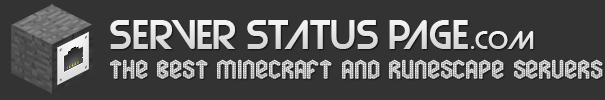
<style>
.page{position:relative;width:605px;height:100px;background:#333333}
.page>*{position:absolute;margin:0}
.t1{font:40px "Strasua";color:#e4e4e4}
.t2{font:25px "Strasua";color:#e3e3e3}
.t3{font:35px "soma";color:#ffffff}
</style>
<div class="page">
<p class="t1" style="left:110px;top:20px;width:358px;height:29px">SERVER STATUS PAGE</p>
<p class="t2" style="left:471px;top:31px;width:63px;height:18px">.com</p>
<p class="t3" style="left:110px;top:59px;width:493px;height:20px">The best minecraft and runescape servers</p>
</div>
